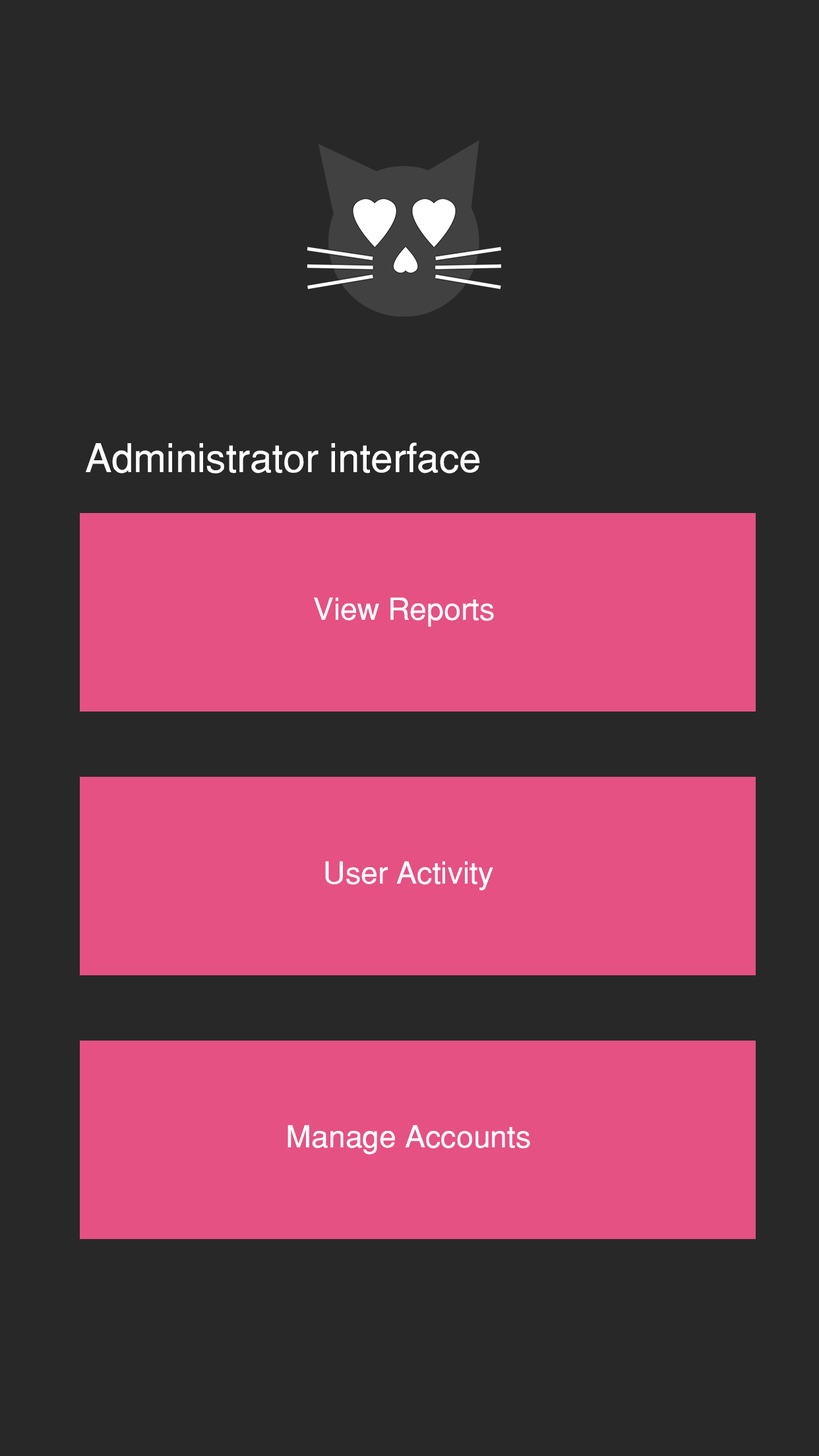
<style>
.page{position:relative;width:819px;height:1456px;background:#282828}
.page>*{position:absolute;margin:0}
.t1{font:39.6px "Helvetica-Normal";color:#ffffff}
.t2{font:30.5px "Helvetica-Normal";color:#ffffff}
</style>
<div class="page">
<p class="t1" style="left:86px;top:442px;width:394px;height:31px">Administrator interface</p>
<p class="t2" style="left:314px;top:597px;width:180px;height:30px">View Reports</p>
<p class="t2" style="left:325px;top:861px;width:168px;height:30px">User Activity</p>
<p class="t2" style="left:288px;top:1125px;width:242px;height:30px">Manage Accounts</p>
</div>
